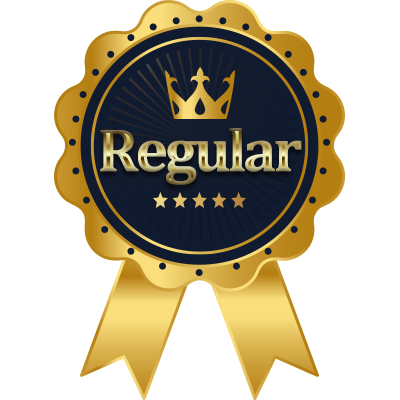
<style>
.page{position:relative;width:400px;height:400px;background:#ffffff}
.page>*{position:absolute;margin:0}
.t1{font:61.7px "Cambria-Bold";letter-spacing:-0.05em}
</style>
<div class="page">
<p class="t1" style="left:100px;top:128px;width:202px;height:57px">Regular</p>
</div>
